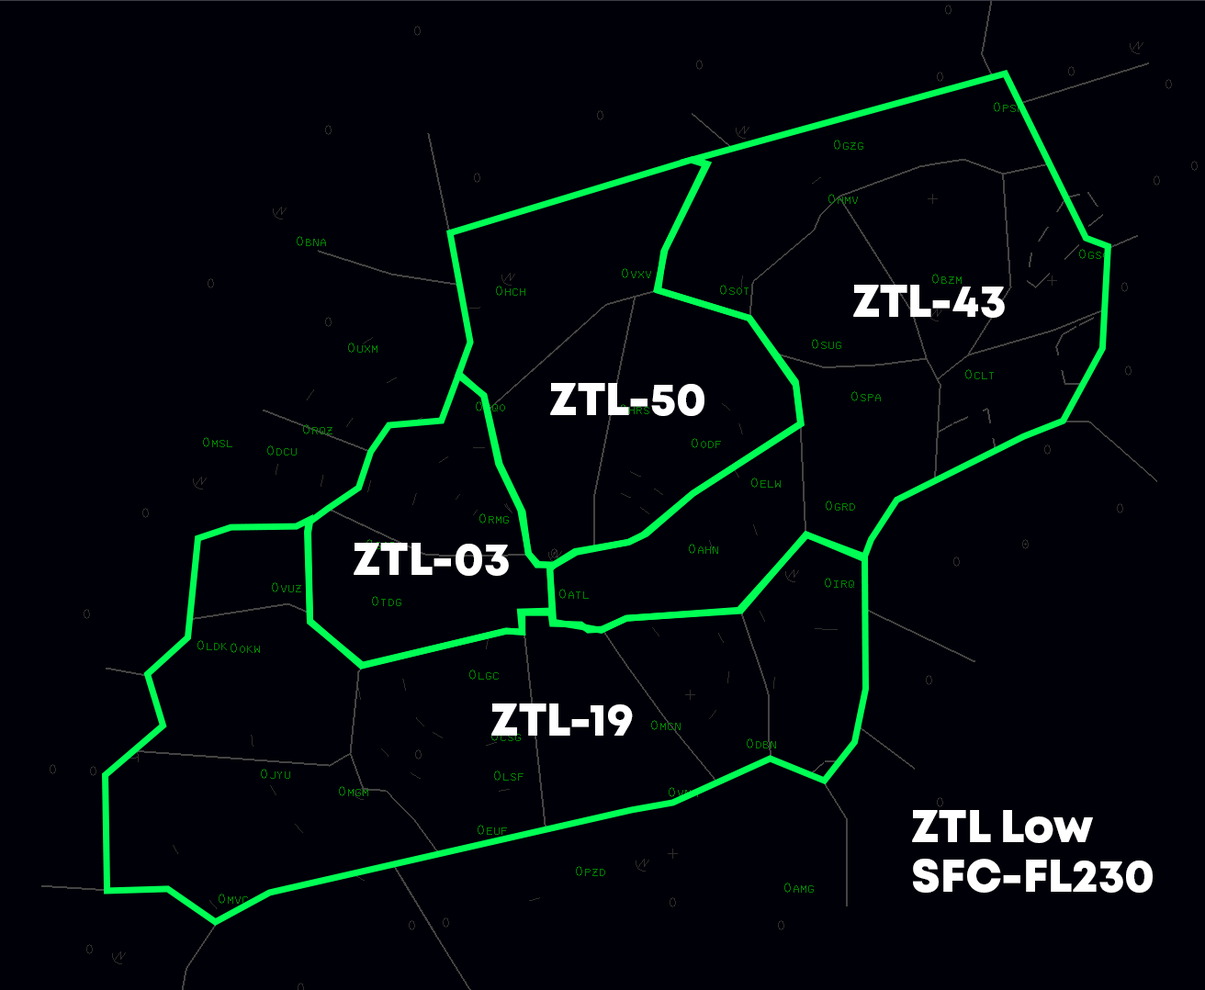
<style>
.page{position:relative;width:1205px;height:990px;background:#000008}
.page>*{position:absolute;margin:0}
.t1{font:45.9px "Mont-HeavyDEMO";color:#ffffff}
.t2{font:45.9px/49.7px "Mont-HeavyDEMO";color:#ffffff}
</style>
<div class="page">
<p class="t1" style="left:853px;top:285px;width:152px;height:33px">ZTL-43</p>
<p class="t1" style="left:550px;top:383px;width:154px;height:33px">ZTL-50</p>
<p class="t1" style="left:354px;top:543px;width:155px;height:33px">ZTL-03</p>
<p class="t1" style="left:491px;top:703px;width:142px;height:32px">ZTL-19</p>
<p class="t2" style="left:912px;top:810px;width:240px;height:82px">ZTL Low<br>SFC-FL230</p>
</div>
